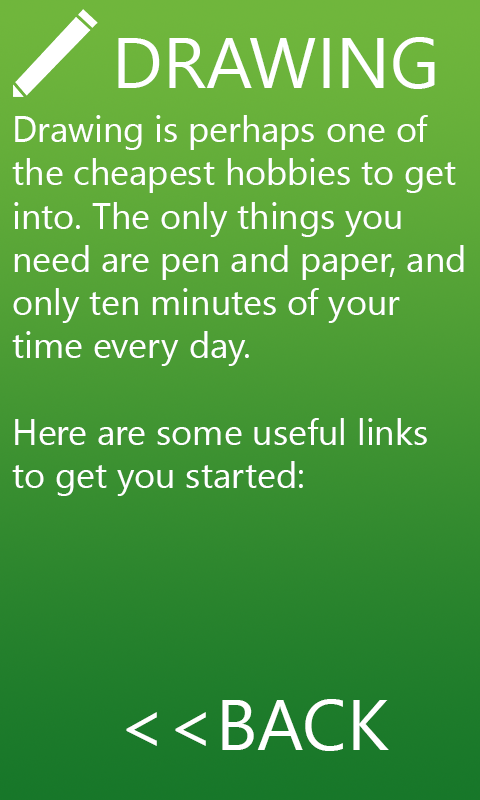
<style>
.page{position:relative;width:480px;height:800px}
.page>*{position:absolute;margin:0}
.t1{font:72px "SegoeUIHistoric";color:#ffffff}
.t2{font:36px "SegoeUIHistoric";color:#ffffff}
</style>
<div class="page">
<p class="t1" style="left:118px;top:37px;width:317px;height:52px">DRAWING</p>
<p class="t2" style="left:12px;top:115px;width:452px;height:381px">Drawing is perhaps one of<br>the cheapest hobbies to get<br>into. The only things you <br>need are pen and paper, and<br>only ten minutes of your<br>time every day.<br><br>Here are some useful links<br>to get you started:</p>
<p class="t1" style="left:126px;top:699px;width:263px;height:52px">&lt;&lt;BACK</p>
</div>
